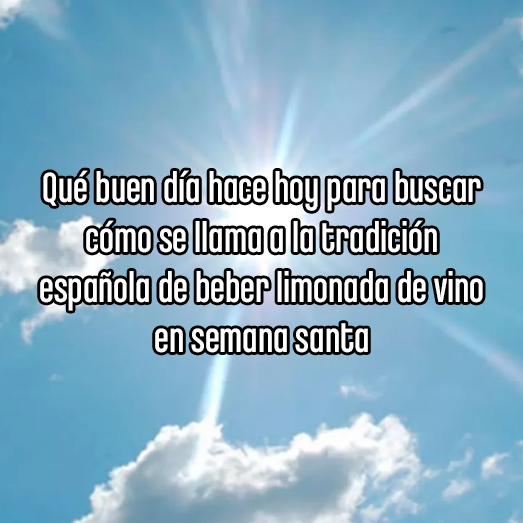
<style>
.page{position:relative;width:523px;height:523px}
.page>*{position:absolute;margin:0}
.t1{font:44.9px "ChaletComprime-CologneEighty";color:#ffffff}
</style>
<div class="page">
<p class="t1" style="left:40px;top:170px;width:443px;height:183px;text-align:center">Qué buen día hace hoy para buscar<br>cómo se llama a la tradición<br>española de beber limonada de vino<br>en semana santa</p>
</div>
